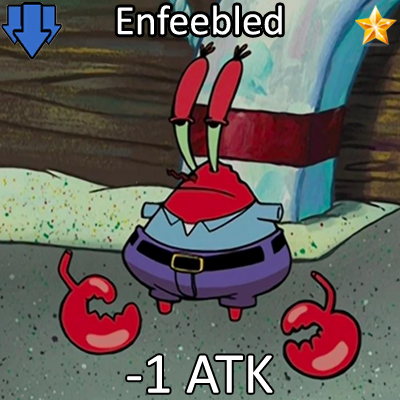
<style>
.page{position:relative;width:400px;height:400px}
.page>*{position:absolute;margin:0}
.t1{font:72px "Calibri";color:#ffffff}
.t2{font:100px "Calibri";color:#ffffff}
</style>
<div class="page">
<p class="t1" style="left:117px;top:5px;width:165px;height:30px">Enfeebled</p>
<p class="t2" style="left:127px;top:355px;width:146px;height:38px">-1 ATK</p>
</div>
